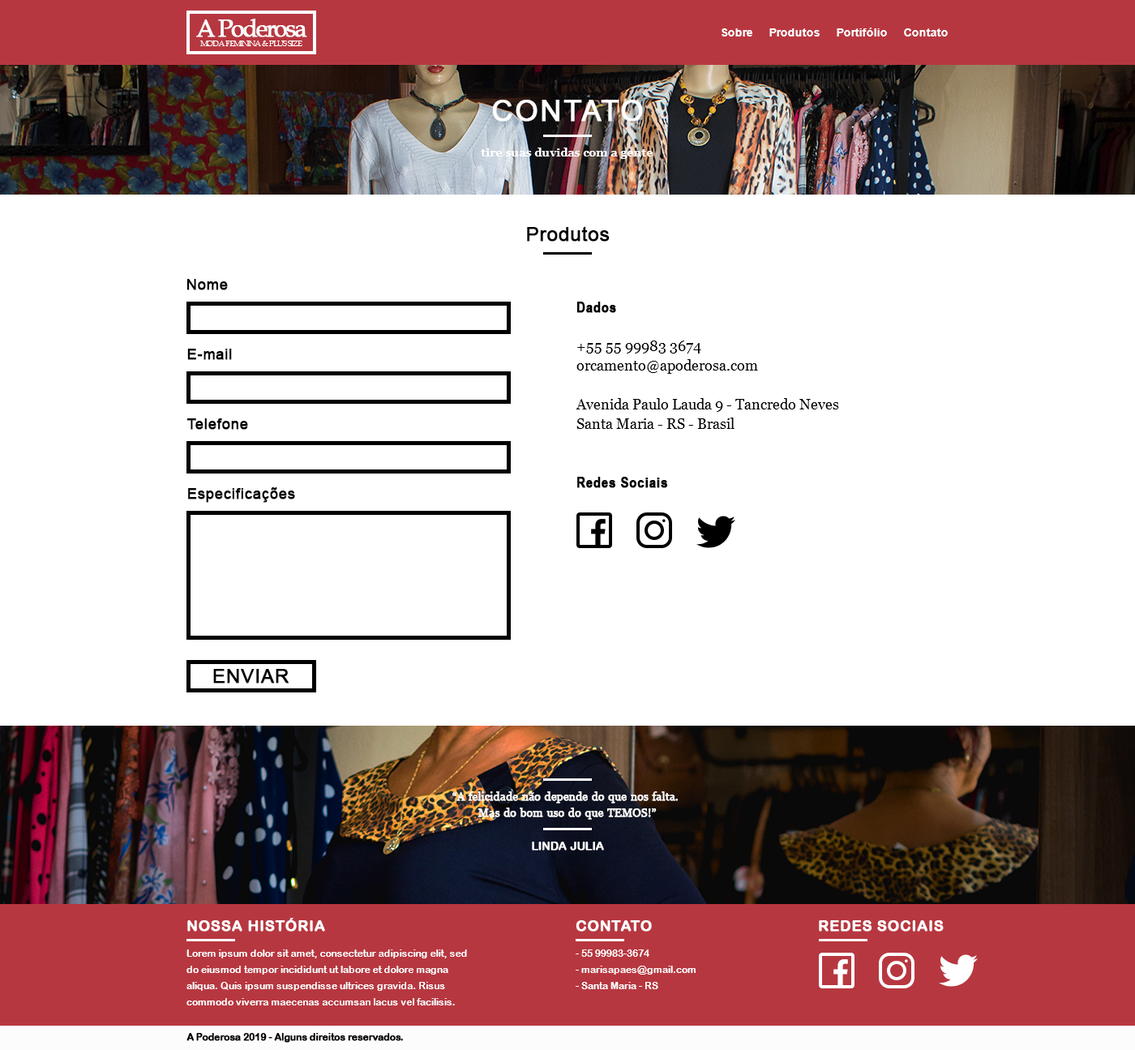
<style>
.page{position:relative;width:1135px;height:1050px;background:#ffffff}
.page>*{position:absolute;margin:0}
.t1{font:24.3px "BookAntiqua";letter-spacing:-0.1em;color:#ffffff;font-weight:bold}
.t2{font:11.4px "Arial-BoldMT";color:#fffeff}
.t3{font:8.1px "BookAntiqua";letter-spacing:-0.1em;color:#ffffff;text-transform:uppercase}
.t4{font:29.2px "ArialMT";letter-spacing:0.05em;color:#ffffff;text-transform:uppercase;font-weight:bold}
.t5{font:11.4px "Georgia-Bold";color:#ffffff}
.t6{font:19.5px "ArialMT";color:#000000;font-weight:bold}
.t7{font:14.6px "ArialMT";color:#000000;font-weight:bold}
.t8{font:14.6px/19.5px "Georgia";color:#000000}
.t9{font:14.6px/19.5px "ArialNarrow-Bold";color:#000000;font-weight:bold}
.t10{font:11.4px/16.2px "Georgia";letter-spacing:0.01em;color:#fcfcfc;font-weight:bold}
.t11{font:11.4px/16.2px "Georgia";letter-spacing:0.01em;color:#fcfcfc;text-transform:uppercase;font-weight:bold}
.t12{font:11.4px "ArialRoundedMTBold";color:#fcfcfc;text-transform:uppercase;font-weight:bold}
.t13{font:14.6px "ArialRoundedMTBold";color:#ffffff;text-transform:uppercase;font-weight:bold}
.t14{font:9.7px/16.2px "ArialRoundedMTBold";color:#ffffff}
.t15{font:9.7px "ArialRoundedMTBold";color:#000000;font-weight:bold}
</style>
<div class="page">
<p class="t1" style="left:196px;top:19px;width:111px;height:18px">A Poderosa</p>
<p class="t2" style="left:722px;top:28px;width:226px;height:8px">Sobre     Produtos     Portifólio     Contato</p>
<p class="t3" style="left:200px;top:41px;width:103px;height:5px">moda feminina &amp; plus size</p>
<p class="t4" style="left:492px;top:100px;width:151px;height:22px">contato</p>
<p class="t5" style="left:481px;top:148px;width:173px;height:11px">tire suas duvidas com a gente</p>
<p class="t6" style="left:527px;top:226px;width:83px;height:16px">Produtos</p>
<p class="t7" style="left:187px;top:279px;width:41px;height:11px">Nome</p>
<p class="t8" style="left:576px;top:302px;width:263px;height:186px"><span class="t9">Dados<br><br></span>+55 55 99983 3674<br>orcamento@apoderosa.com<br><br>Avenida Paulo Lauda 9 - Tancredo Neves<br>Santa Maria - RS - Brasil<br><br><br><span class="t9">Redes Sociais</span></p>
<p class="t7" style="left:187px;top:349px;width:45px;height:11px">E-mail</p>
<p class="t7" style="left:187px;top:418px;width:61px;height:12px">Telefone</p>
<p class="t7" style="left:188px;top:487px;width:107px;height:16px">Especificações</p>
<p class="t6" style="left:213px;top:669px;width:77px;height:15px">ENVIAR</p>
<p class="t10" style="left:453px;top:792px;width:225px;height:28px;text-align:center"><span class="t11">“</span>A felicidade não depende do que nos falta. <br>Mas do bom uso do que TEMOS!”</p>
<p class="t12" style="left:532px;top:842px;width:72px;height:9px">linda julia</p>
<p class="t13" style="left:187px;top:918px;width:138px;height:14px">NOSSA HIStÓRIA</p>
<p class="t13" style="left:576px;top:920px;width:76px;height:12px">contato</p>
<p class="t13" style="left:819px;top:920px;width:125px;height:12px">redes sociais</p>
<p class="t14" style="left:187px;top:950px;width:280px;height:56px">Lorem ipsum dolor sit amet, consectetur adipiscing elit, sed do eiusmod tempor incididunt ut labore et dolore magna aliqua. Quis ipsum suspendisse ultrices gravida. Risus commodo viverra maecenas accumsan lacus vel facilisis.</p>
<p class="t14" style="left:576px;top:950px;width:120px;height:39px">- 55 99983-3674<br>- marisapaes@gmail.com<br>- Santa Maria - RS</p>
<p class="t15" style="left:187px;top:1033px;width:216px;height:10px">A Poderosa 2019 - Alguns direitos reservados.</p>
</div>
